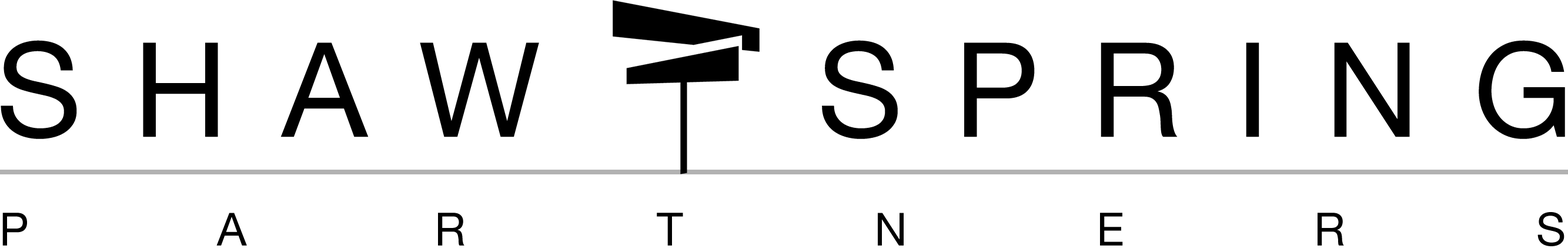
<style>
.page{position:relative;width:1568px;height:248px;background:#ffffff}
.page>*{position:absolute;margin:0}
.t1{font:131.4px "HelveticaNeue";letter-spacing:0.4em;color:#000000}
.t2{font:45.6px "HelveticaNeue";letter-spacing:4.17em;color:#000000}
</style>
<div class="page">
<p class="t1" style="left:1px;top:40px;width:538px;height:99px">SHAW</p>
<p class="t1" style="left:822px;top:40px;width:743px;height:99px">SPRING</p>
<p class="t2" style="left:2px;top:212px;width:1562px;height:34px">PARTNERS</p>
</div>
